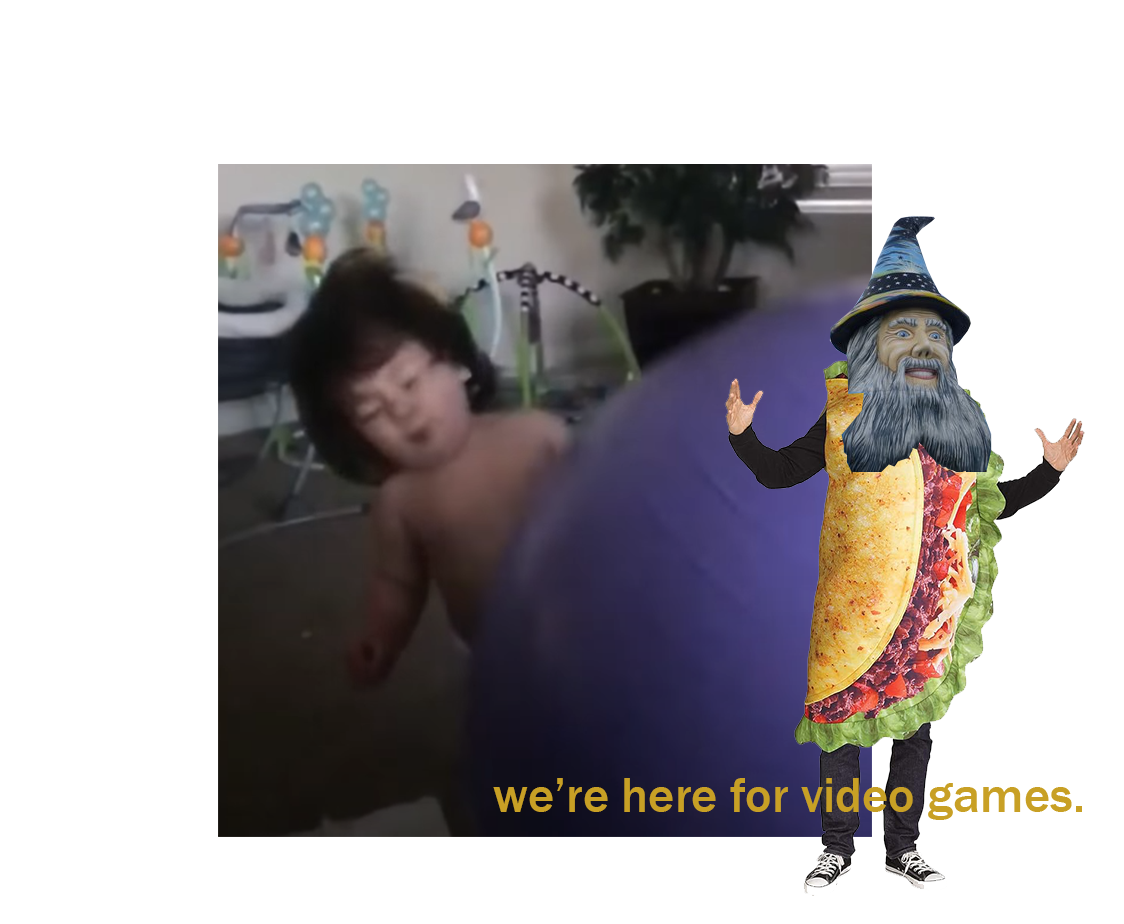
<style>
.page{position:relative;width:1124px;height:924px;background:#ffffff}
.page>*{position:absolute;margin:0}
.t1{font:50px "FranklinGothic-Medium";color:#c8a025}
</style>
<div class="page">
<p class="t1" style="left:493px;top:778px;width:589px;height:42px">we’re here for video games.</p>
</div>
